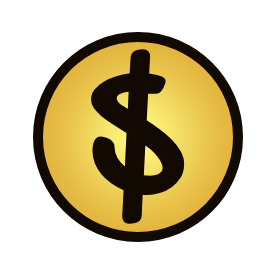
<style>
.page{position:relative;width:275px;height:274px;background:#ffffff}
.page>*{position:absolute;margin:0}
.t1{font:238px "GochiHand-Regular";color:#120902}
</style>
<div class="page">
<p class="t1" style="left:91px;top:49px;width:94px;height:175px">$</p>
</div>
